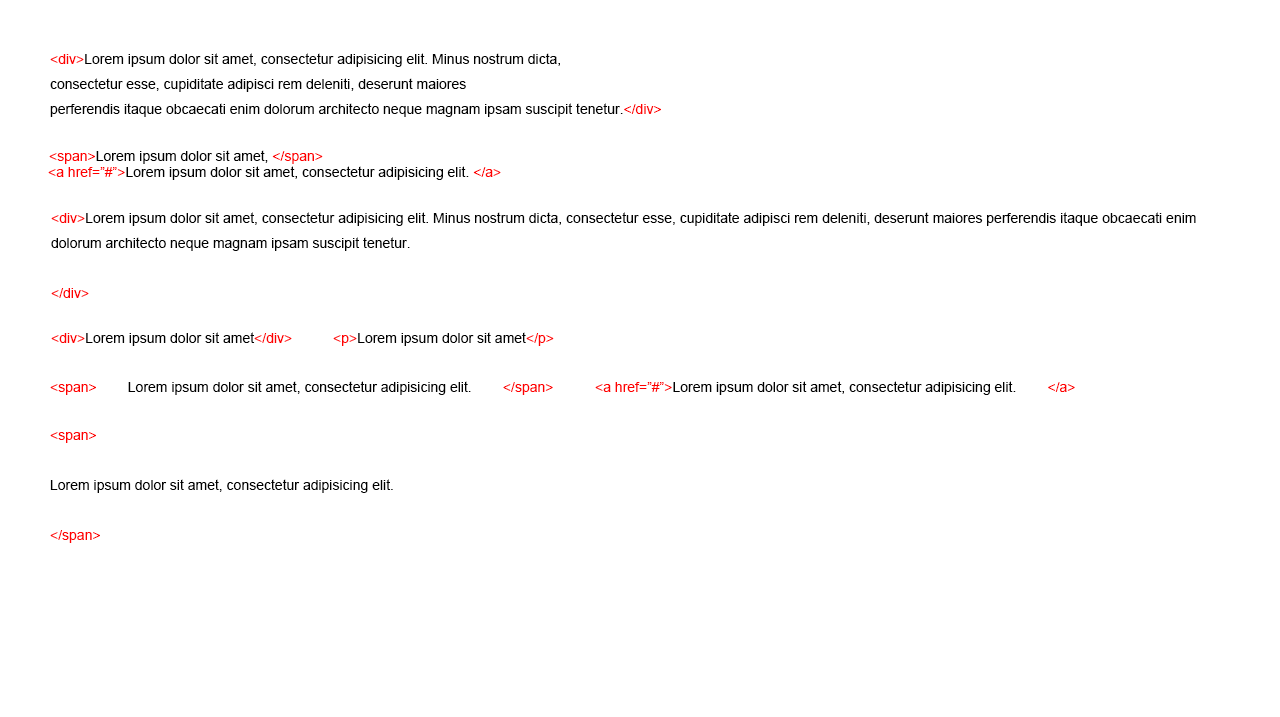
<style>
.page{position:relative;width:1280px;height:717px;background:#ffffff}
.page>*{position:absolute;margin:0}
.t1{font:14px/25px "ArialMT";color:#000000}
.t2{font:14px/25px "ArialMT";color:#ff0000}
.t3{font:14px "ArialMT";color:#000000}
.t4{font:14px "ArialMT";color:#ff0000}
</style>
<div class="page">
<p class="t1" style="left:50px;top:53px;width:611px;height:64px"><span class="t2">&lt;div&gt;</span>Lorem ipsum dolor sit amet, consectetur adipisicing elit. Minus nostrum dicta, <br>consectetur esse, cupiditate adipisci rem deleniti, deserunt maiores <br>perferendis itaque obcaecati enim dolorum architecto neque magnam ipsam suscipit tenetur.<span class="t2">&lt;/div&gt;</span></p>
<p class="t3" style="left:49px;top:150px;width:274px;height:14px"><span class="t4">&lt;span&gt;</span>Lorem ipsum dolor sit amet, <span class="t4">&lt;/span&gt;</span></p>
<p class="t3" style="left:48px;top:166px;width:453px;height:14px"><span class="t4">&lt;a href=”#”&gt;</span>Lorem ipsum dolor sit amet, consectetur adipisicing elit. <span class="t4">&lt;/a&gt;</span></p>
<p class="t1" style="left:51px;top:212px;width:1145px;height:86px"><span class="t2">&lt;div&gt;</span>Lorem ipsum dolor sit amet, consectetur adipisicing elit. Minus nostrum dicta, consectetur esse, cupiditate adipisci rem deleniti, deserunt maiores perferendis itaque obcaecati enim <br>dolorum architecto neque magnam ipsam suscipit tenetur.<br><span class="t2"><br>&lt;/div&gt;</span></p>
<p class="t3" style="left:51px;top:332px;width:241px;height:14px"><span class="t4">&lt;div&gt;</span>Lorem ipsum dolor sit amet<span class="t4">&lt;/div&gt;</span></p>
<p class="t3" style="left:333px;top:332px;width:221px;height:14px"><span class="t4">&lt;p&gt;</span>Lorem ipsum dolor sit amet<span class="t4">&lt;/p&gt;</span></p>
<p class="t3" style="left:50px;top:381px;width:503px;height:14px"><span class="t4">&lt;span&gt;        </span>Lorem ipsum dolor sit amet, consectetur adipisicing elit.        <span class="t4">&lt;/span&gt;</span></p>
<p class="t3" style="left:595px;top:381px;width:480px;height:14px"><span class="t4">&lt;a href=”#”&gt;</span>Lorem ipsum dolor sit amet, consectetur adipisicing elit.        <span class="t4">&lt;/a&gt;</span></p>
<p class="t1" style="left:50px;top:432px;width:343px;height:111px"><span class="t2">&lt;span&gt;<br></span><br>Lorem ipsum dolor sit amet, consectetur adipisicing elit.<br><span class="t2"><br>&lt;/span&gt;</span></p>
</div>
